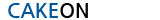
<style>
.page{position:relative;width:160px;height:20px;background:#ffffff}
.page>*{position:absolute;margin:0}
.t1{font:20px "NanumGothicBold";color:#01579a}
.t2{font:20px "NanumGothicBold";color:#000000}
</style>
<div class="page">
<p class="t1" style="left:8px;top:3px;width:80px;height:15px">CAKE<span class="t2">ON</span></p>
</div>
